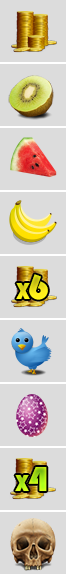
<style>
.page{position:relative;width:66px;height:576px;background:#dcdcdc}
.page>*{position:absolute;margin:0}
.t1{font:24px "Bauhaus93";letter-spacing:-0.025em;color:#ede619}
.t2{font:36px "Bauhaus93";letter-spacing:-0.025em;color:#ede619}
.t3{font:24px "Bauhaus93";letter-spacing:-0.025em}
.t4{font:36px "Bauhaus93";letter-spacing:-0.025em}
</style>
<div class="page">
<p class="t1" style="left:16px;top:274px;width:32px;height:26px">X<span class="t2">6</span></p>
<p class="t3" style="left:15px;top:467px;width:32px;height:24px">X<span class="t4">4</span></p>
</div>
